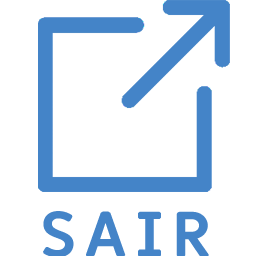
<style>
.page{position:relative;width:256px;height:256px;background:#ffffff}
.page>*{position:absolute;margin:0}
.t1{font:62.3px "MiriamLibre-Bold";letter-spacing:0.1em;color:#4484c8;scale:1.09 1}
</style>
<div class="page">
<p class="t1" style="left:43px;top:211px;width:166px;height:47px">SAIR</p>
</div>
